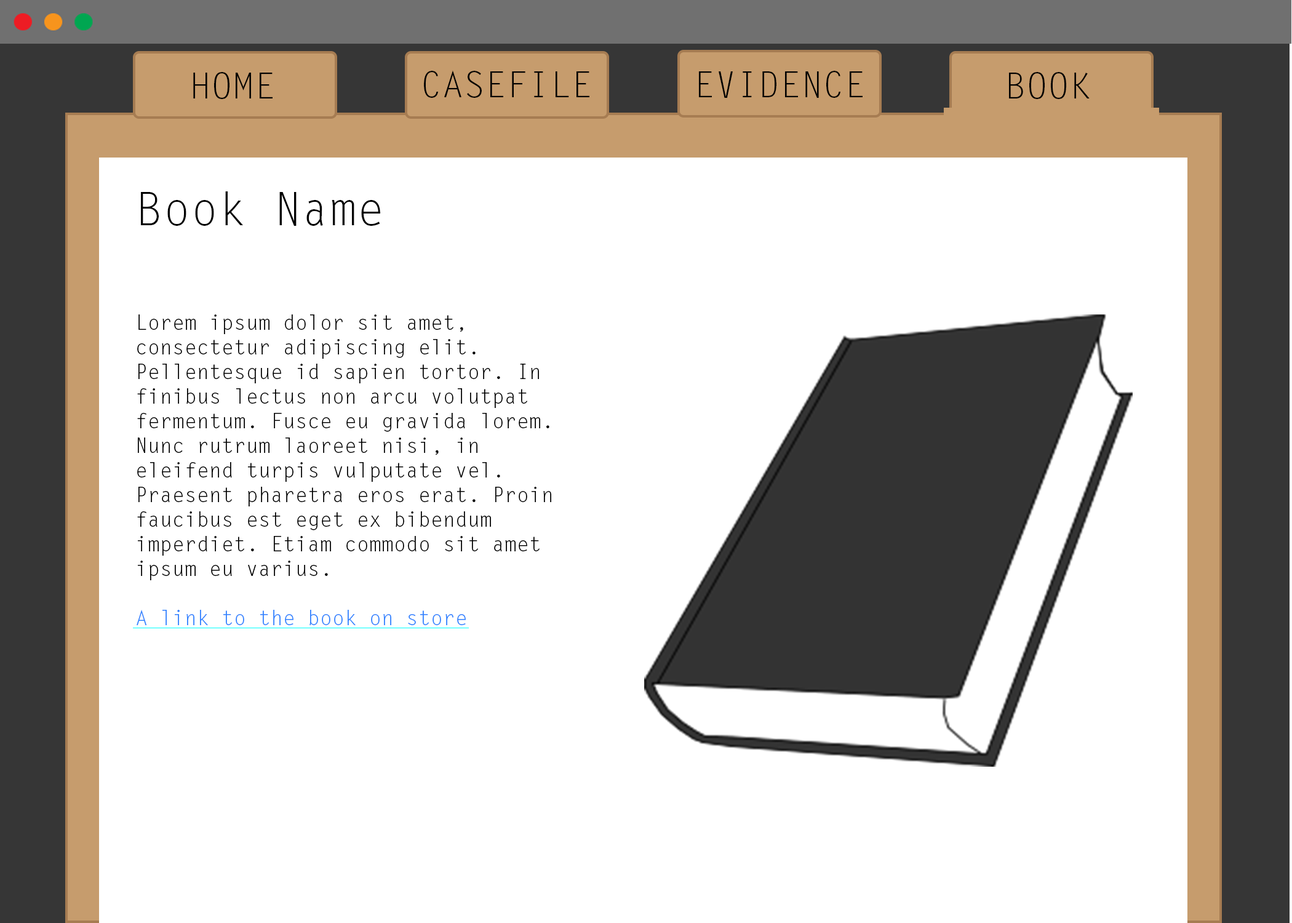
<style>
.page{position:relative;width:1292px;height:923px;background:#ffffff}
.page>*{position:absolute;margin:0}
.t1{font:35.9px "LetterGothicStd";color:#000000}
.t2{font:46.1px "LetterGothicStd";color:#000000}
.t3{font:20.5px "LetterGothicStd";color:#000000}
.t4{font:20.5px "LetterGothicStd";color:#3183ff}
</style>
<div class="page">
<p class="t1" style="left:193px;top:72px;width:80px;height:27px">HOME</p>
<p class="t1" style="left:424px;top:70px;width:165px;height:28px">CASEFILE</p>
<p class="t1" style="left:699px;top:71px;width:164px;height:27px">EVIDENCE</p>
<p class="t1" style="left:1009px;top:72px;width:81px;height:27px">BOOK</p>
<p class="t2" style="left:141px;top:191px;width:239px;height:35px">Book Name</p>
<p class="t3" style="left:137px;top:314px;width:414px;height:311px">Lorem ipsum dolor sit amet, consectetur adipiscing elit. Pellentesque id sapien tortor. In finibus lectus non arcu volutpat fermentum. Fusce eu gravida lorem. Nunc rutrum laoreet nisi, in eleifend turpis vulputate vel. Praesent pharetra eros erat. Proin faucibus est eget ex bibendum imperdiet. Etiam commodo sit amet ipsum eu varius.<br><br><span class="t4">A link to the book on store</span></p>
</div>
